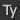
<style>
.page{position:relative;width:20px;height:20px;background:#333333}
.page>*{position:absolute;margin:0}
.t1{font:14px "Tahoma";color:#cccccc}
</style>
<div class="page">
<p class="t1" style="left:2px;top:4px;width:15px;height:14px">Ty</p>
</div>
